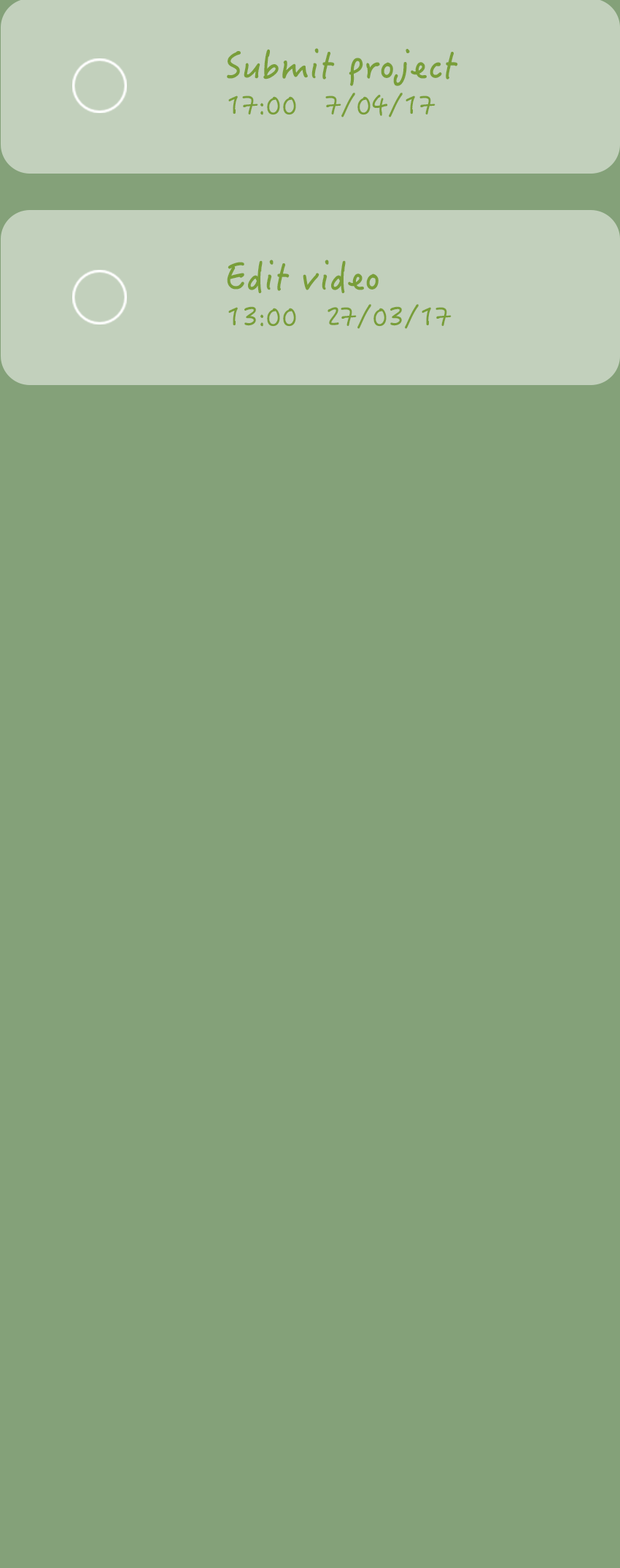
<style>
.page{position:relative;width:620px;height:1568px;background:#84a179}
.page>*{position:absolute;margin:0}
.t1{font:37.4px "HanziPenTC-W5";color:#799e39}
.t2{font:26.7px "HanziPenTC-W5";color:#799e39}
</style>
<div class="page">
<p class="t1" style="left:227px;top:48px;width:231px;height:38px">Submit project</p>
<p class="t2" style="left:228px;top:93px;width:207px;height:24px">17:00   7/04/17</p>
<p class="t1" style="left:227px;top:260px;width:152px;height:33px">Edit video</p>
<p class="t2" style="left:228px;top:304px;width:223px;height:25px">13:00   27/03/17</p>
</div>
